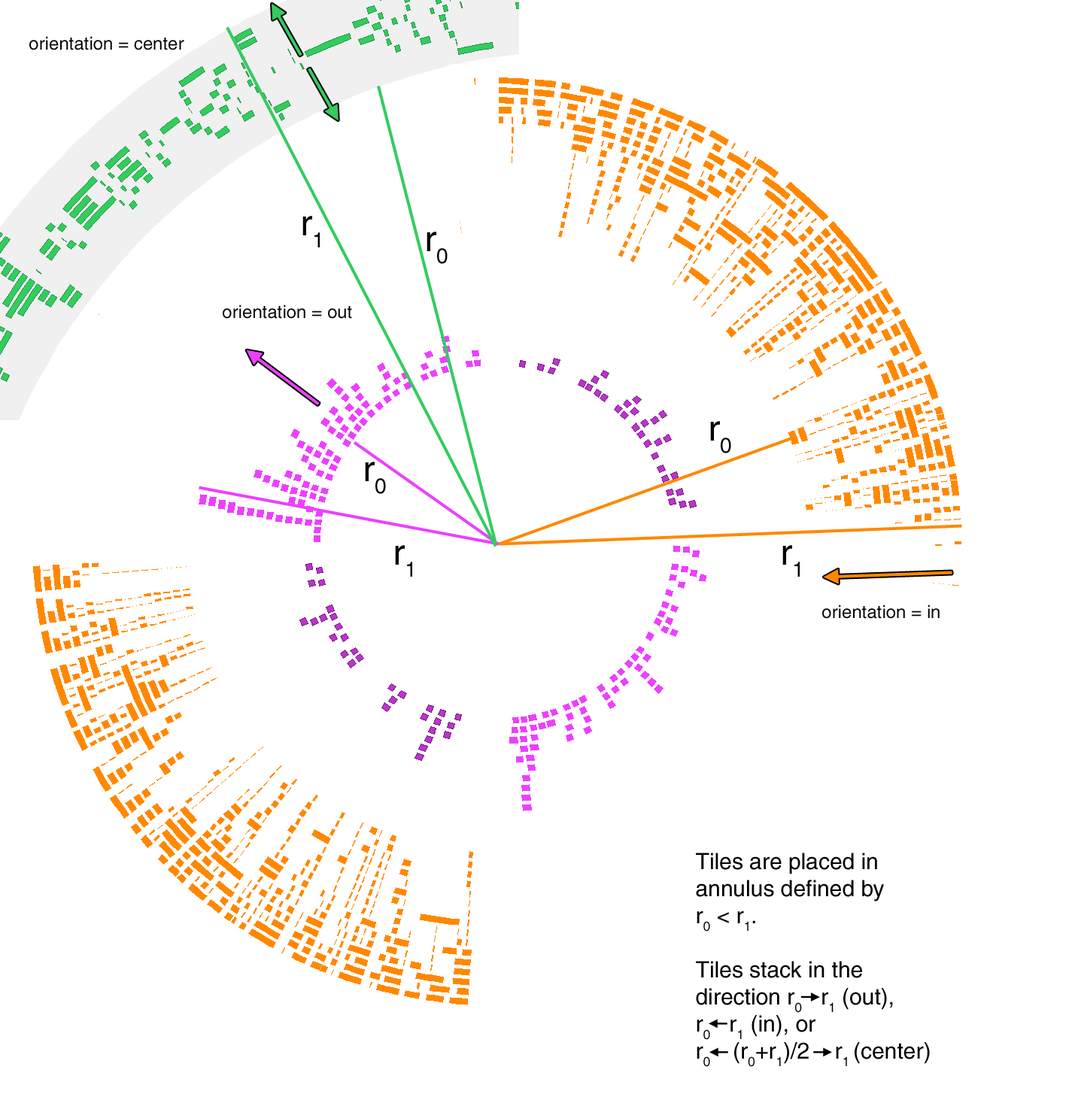
<style>
.page{position:relative;width:1072px;height:1112px;background:#ffffff}
.page>*{position:absolute;margin:0}
.t1{font:18.1px "Helvetica";color:#000000}
.t2{font:36.1px "Helvetica";color:#000000}
.t3{font:22.6px "Helvetica";color:#000000}
</style>
<div class="page">
<p class="t1" style="left:29px;top:36px;width:155px;height:14px">orientation = center</p>
<p class="t2" style="left:302px;top:216px;width:18px;height:31px">r1</p>
<p class="t2" style="left:426px;top:232px;width:22px;height:32px">r0</p>
<p class="t1" style="left:223px;top:305px;width:129px;height:14px">orientation = out</p>
<p class="t2" style="left:710px;top:421px;width:21px;height:33px">r0</p>
<p class="t2" style="left:365px;top:462px;width:21px;height:32px">r0</p>
<p class="t2" style="left:395px;top:545px;width:17px;height:32px">r1</p>
<p class="t2" style="left:782px;top:545px;width:18px;height:32px">r1</p>
<p class="t1" style="left:822px;top:605px;width:117px;height:14px">orientation = in</p>
<p class="t3" style="left:696px;top:853px;width:234px;height:214px">Tiles are placed in <br>annulus defined by<br>r0 &lt; r1. <br><br>Tiles stack in the <br>direction r0   r1 (out),<br>r0   r1 (in), or <br>r0    (r0+r1)/2    r1 (center)</p>
</div>
